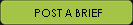
<style>
.page{position:relative;width:133px;height:25px;background:#a4c447}
.page>*{position:absolute;margin:0}
.t1{font:11.2px "CenturyGothic";color:#000000}
</style>
<div class="page">
<p class="t1" style="left:35px;top:9px;width:67px;height:8px">POST A BRIEF</p>
</div>
